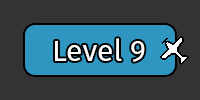
<style>
.page{position:relative;width:200px;height:100px;background:#333333}
.page>*{position:absolute;margin:0}
.t1{font:30px "FiraSans-Regular";color:#ffffff}
</style>
<div class="page">
<p class="t1" style="left:55px;top:38px;width:90px;height:24px">Level 9</p>
</div>
